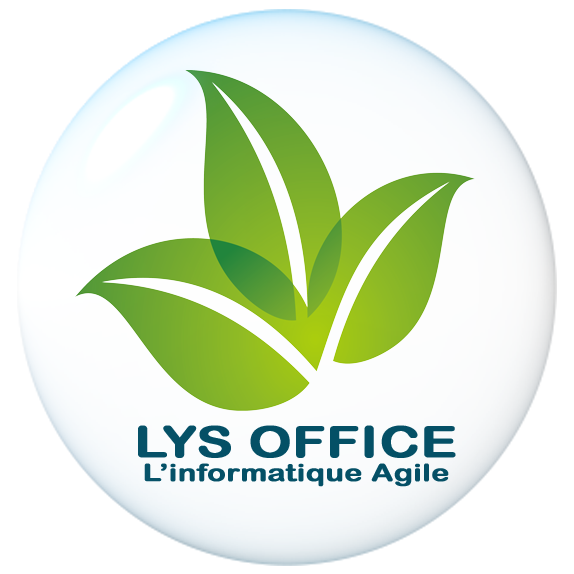
<style>
.page{position:relative;width:574px;height:574px;background:#ffffff}
.page>*{position:absolute;margin:0}
.t1{font:24px "ArialRoundedMTBold";color:#045066;font-weight:bold;scale:1.25 1}
.t2{font:43.2px "ArialRoundedMTBold";color:#045066;font-weight:bold;scale:1.25 1}
</style>
<div class="page">
<p class="t1" style="left:138px;top:425px;width:318px;height:62px;text-align:center"><span class="t2">LYS OFFICE<br></span>L’informatique Agile</p>
</div>
